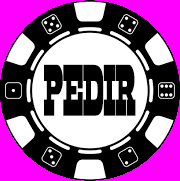
<style>
.page{position:relative;width:180px;height:181px;background:#000000}
.page>*{position:absolute;margin:0}
.t1{font:68.7px "Cowboys2.0";letter-spacing:-0.025em;color:#000000;scale:0.46 1}
</style>
<div class="page">
<p class="t1" style="left:44px;top:64px;width:92px;height:52px">pedir</p>
</div>
